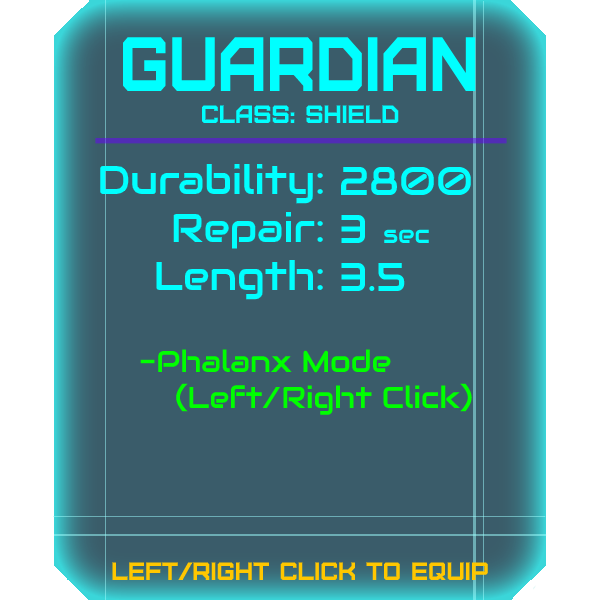
<style>
.page{position:relative;width:600px;height:600px;background:#3a5c6a}
.page>*{position:absolute;margin:0}
.t1{font:76.8px "Furore";color:#00ffff;scale:0.88 1}
.t2{font:25px "Furore";color:#00ffff}
.t3{font:40px "Audiowide-Regular";color:#00ffff}
.t4{font:25px "Audiowide-Regular";color:#00ffff}
.t5{font:30px "Audiowide-Regular";color:#00ff00}
.t6{font:25px "Furore";color:#ffc700}
</style>
<div class="page">
<p class="t1" style="left:123px;top:37px;width:353px;height:54px">Guardian</p>
<p class="t2" style="left:202px;top:105px;width:197px;height:18px">Class: shield</p>
<p class="t3" style="left:100px;top:163px;width:223px;height:137px;text-align:right">Durability:<br>Repair:<br>Length:</p>
<p class="t3" style="left:341px;top:166px;width:130px;height:125px">2800<br>3  <span class="t4">sec<br></span>3.5</p>
<p class="t5" style="left:140px;top:349px;width:332px;height:66px">-Phalanx Mode<br> (Left/Right Click)</p>
<p class="t6" style="left:112px;top:562px;width:376px;height:18px">left/right click to equip</p>
</div>
